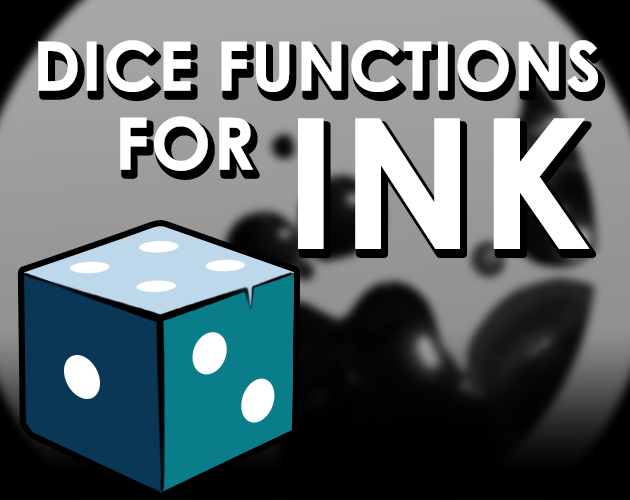
<style>
.page{position:relative;width:630px;height:500px}
.page>*{position:absolute;margin:0}
.t1{font:68.1px "CenturyGothic-Bold";color:#ffffff;font-weight:bold}
.t2{font:71.6px "CenturyGothic-Bold";color:#ffffff;font-weight:bold}
.t3{font:180.9px "CenturyGothic-Bold";color:#ffffff;font-weight:bold}
</style>
<div class="page">
<p class="t1" style="left:38px;top:40px;width:560px;height:52px">DICE FUNCTIONS</p>
<p class="t2" style="left:120px;top:116px;width:470px;height:133px">FOR <span class="t3">INK</span></p>
</div>
